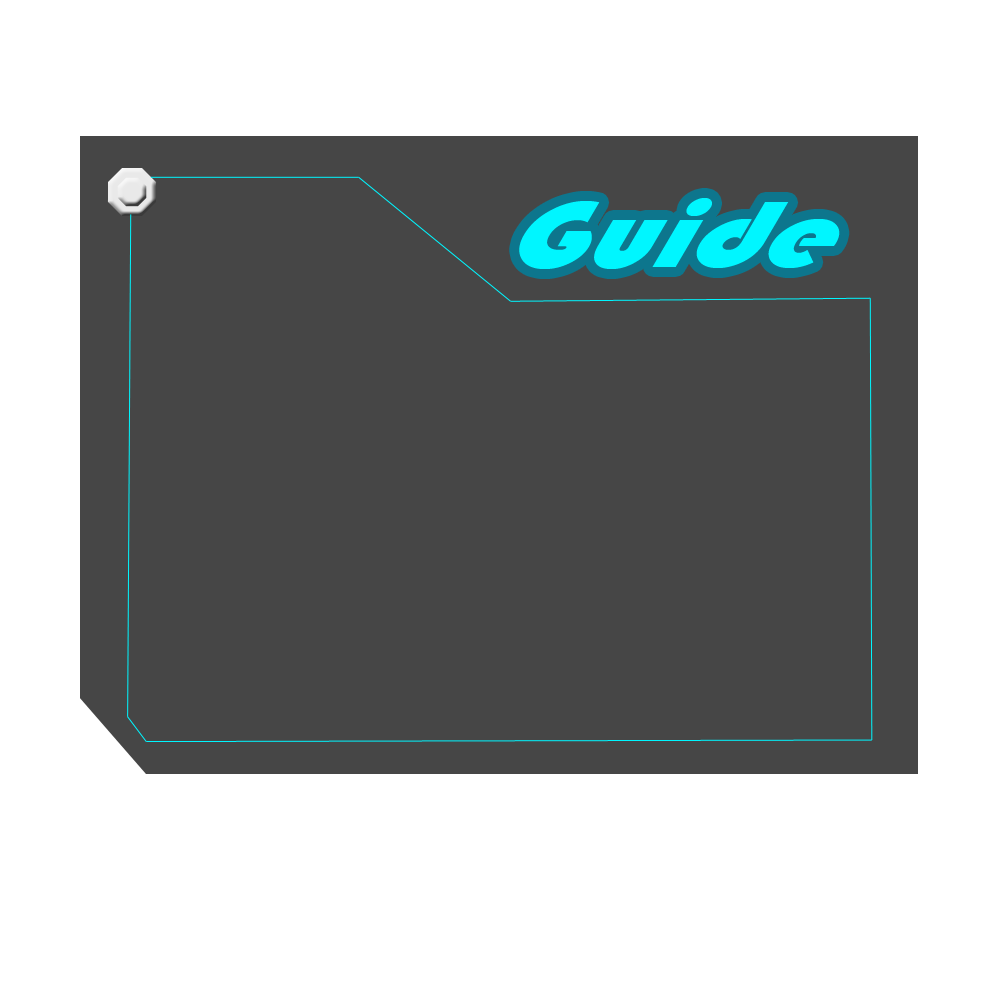
<style>
.page{position:relative;width:1000px;height:1000px;background:#464646}
.page>*{position:absolute;margin:0}
.t1{font:112.1px "Bauhaus93";color:#00f6ff;scale:1.12 1}
</style>
<div class="page">
<p class="t1" style="left:519px;top:198px;width:321px;height:71px">Guide</p>
</div>
